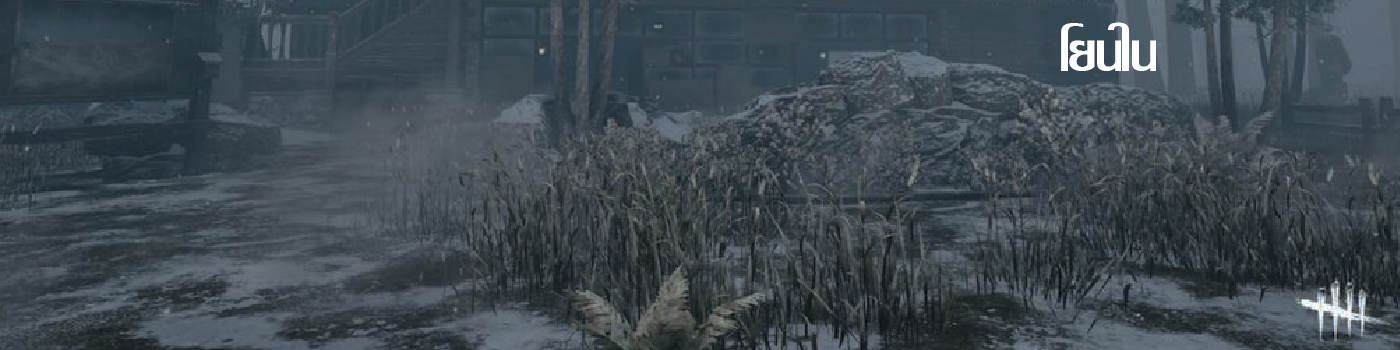
<style>
.page{position:relative;width:1400px;height:350px}
.page>*{position:absolute;margin:0}
.t1{font:76px "LilyUPC";color:#ffffff}
</style>
<div class="page">
<p class="t1" style="left:1061px;top:22px;width:95px;height:49px">โยนใน</p>
</div>
